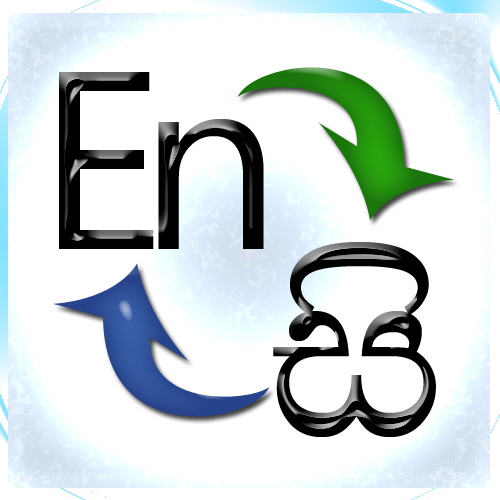
<style>
.page{position:relative;width:500px;height:500px;background:#ffffff}
.page>*{position:absolute;margin:0}
.t1{font:252.6px "SegoeUI";letter-spacing:-0.1em;color:#000000}
.t2{font:288.7px "IskoolaPota";letter-spacing:-0.04em;color:#000000}
</style>
<div class="page">
<p class="t1" style="left:59px;top:72px;width:205px;height:177px">En</p>
<p class="t2" style="left:273px;top:242px;width:163px;height:195px">සි</p>
</div>
